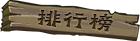
<style>
.page{position:relative;width:140px;height:41px;background:#ffffff}
.page>*{position:absolute;margin:0}
.t1{font:23.3px "GraveBustedStoneLishuSCRoughlyC";color:#382812;scale:1.24 1}
</style>
<div class="page">
<p class="t1" style="left:37px;top:10px;width:76px;height:22px;rotate:5deg">排行榜</p>
</div>
